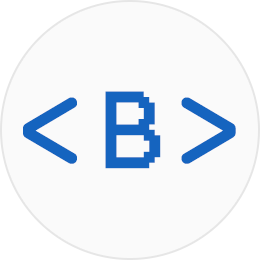
<style>
.page{position:relative;width:260px;height:260px;background:#fafafa}
.page>*{position:absolute;margin:0}
.t1{font:130px "OCRAExtended";color:#1564bf}
.t2{font:87.7px "Terminal";color:#1564bf}
</style>
<div class="page">
<p class="t1" style="left:23px;top:97px;width:213px;height:67px">&lt; &gt;</p>
<p class="t2" style="left:105px;top:91px;width:56px;height:78px">B</p>
</div>
